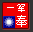
<style>
.page{position:relative;width:33px;height:32px;background:#f20000}
.page>*{position:absolute;margin:0}
.t1{font:10.4px "SimSun";color:#ffffff}
.t2{font:11.7px "SimSun";color:#ffffff}
</style>
<div class="page">
<p class="t1" style="left:7px;top:4px;width:18px;height:8px">一军</p>
<p class="t2" style="left:16px;top:15px;width:11px;height:12px">奉</p>
</div>
